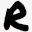
<style>
.page{position:relative;width:32px;height:32px;background:#f7f7f7}
.page>*{position:absolute;margin:0}
.t1{font:40px "PermanentMarker";color:#030000}
</style>
<div class="page">
<p class="t1" style="left:3px;top:0px;width:26px;height:32px">R</p>
</div>
